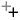
<style>
.page{position:relative;width:20px;height:20px;background:#ffffff}
.page>*{position:absolute;margin:0}
.t1{font:18px "MyriadPro-Regular";color:#808080}
.t2{font:18px "MyriadPro-Regular";color:#000000}
</style>
<div class="page">
<p class="t1" style="left:1px;top:1px;width:10px;height:10px">+</p>
<p class="t2" style="left:8px;top:7px;width:10px;height:10px">+</p>
</div>
